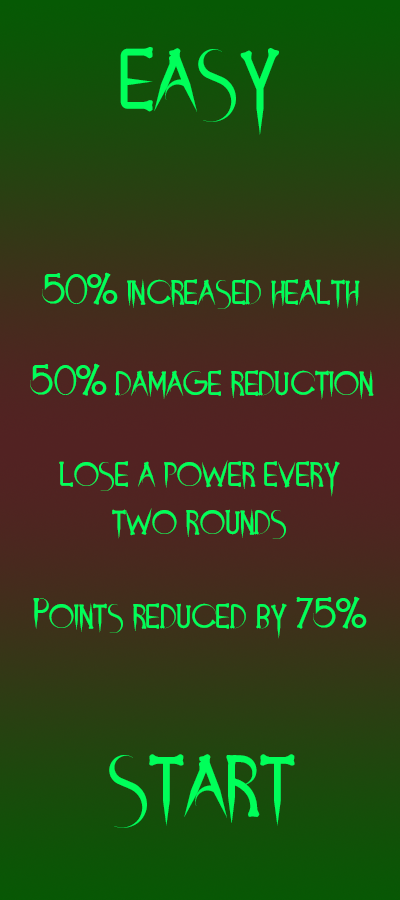
<style>
.page{position:relative;width:400px;height:900px}
.page>*{position:absolute;margin:0}
.t1{font:100px "DemonsandDarlings";color:#00ff5a}
.t2{font:40px "DemonsandDarlings";color:#00ff5a}
</style>
<div class="page">
<p class="t1" style="left:120px;top:47px;width:159px;height:88px">easy</p>
<p class="t2" style="left:42px;top:272px;width:318px;height:37px">50% increased health</p>
<p class="t2" style="left:30px;top:363px;width:344px;height:37px">50% damage reduction</p>
<p class="t2" style="left:59px;top:460px;width:281px;height:79px;text-align:center">lose a power every two rounds</p>
<p class="t2" style="left:33px;top:596px;width:334px;height:43px">Points reduced by 75%</p>
<p class="t1" style="left:109px;top:754px;width:186px;height:74px">start</p>
</div>
